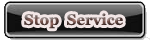
<style>
.page{position:relative;width:150px;height:40px}
.page>*{position:absolute;margin:0}
.t1{font:15px "Georgia-Bold"}
</style>
<div class="page">
<p class="t1" style="left:24px;top:13px;width:99px;height:16px">Stop  Service</p>
</div>
